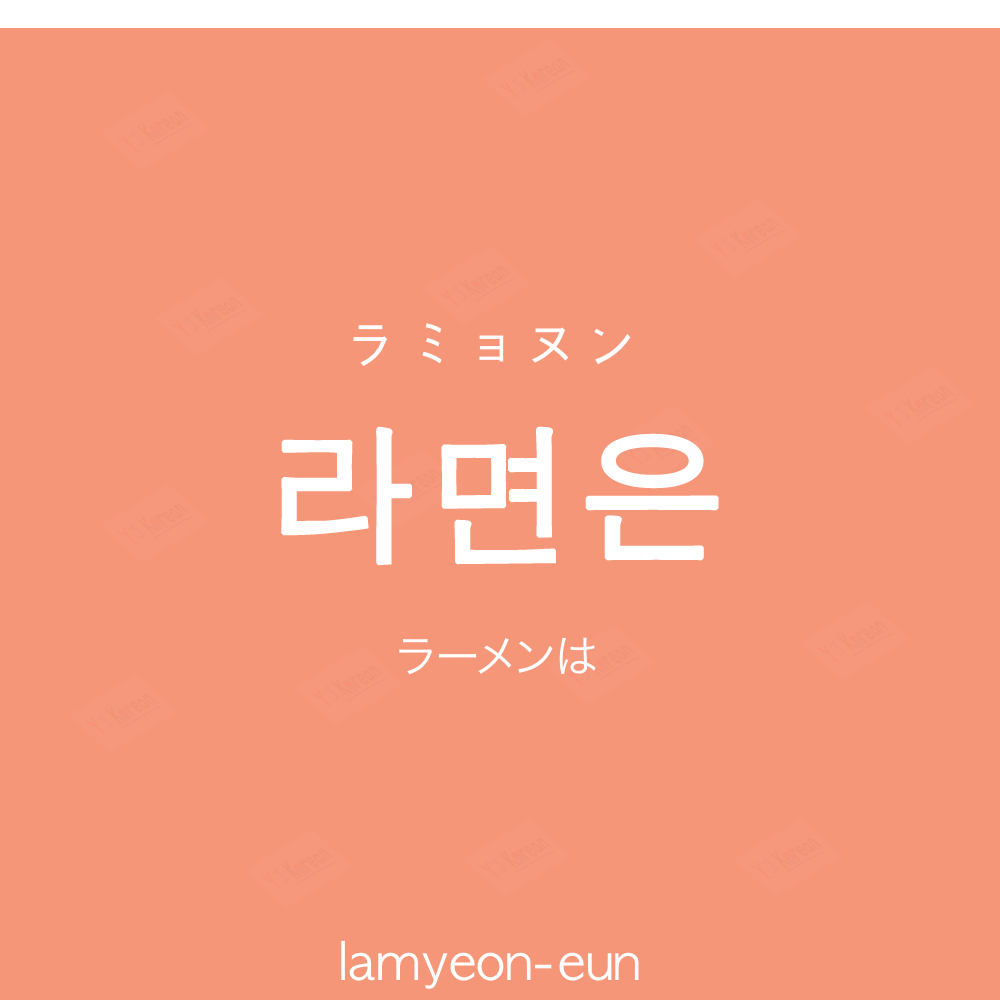
<style>
.page{position:relative;width:1000px;height:1000px;background:#f69679}
.page>*{position:absolute;margin:0}
.t1{font:60px "AppleGothic";color:#ffffff}
.t2{font:150px "AppleGothic";color:#ffffff;font-weight:bold}
.t3{font:45px "HiraKakuProN-W3";color:#ffffff}
.t4{font:50px "AppleGothic";color:#ffffff}
</style>
<div class="page">
<p class="t1" style="left:353px;top:323px;width:278px;height:43px">ラミョヌン</p>
<p class="t2" style="left:281px;top:426px;width:438px;height:140px">라면은</p>
<p class="t3" style="left:399px;top:637px;width:197px;height:38px">ラーメンは</p>
<p class="t4" style="left:341px;top:940px;width:298px;height:49px">lamyeon-eun</p>
</div>
